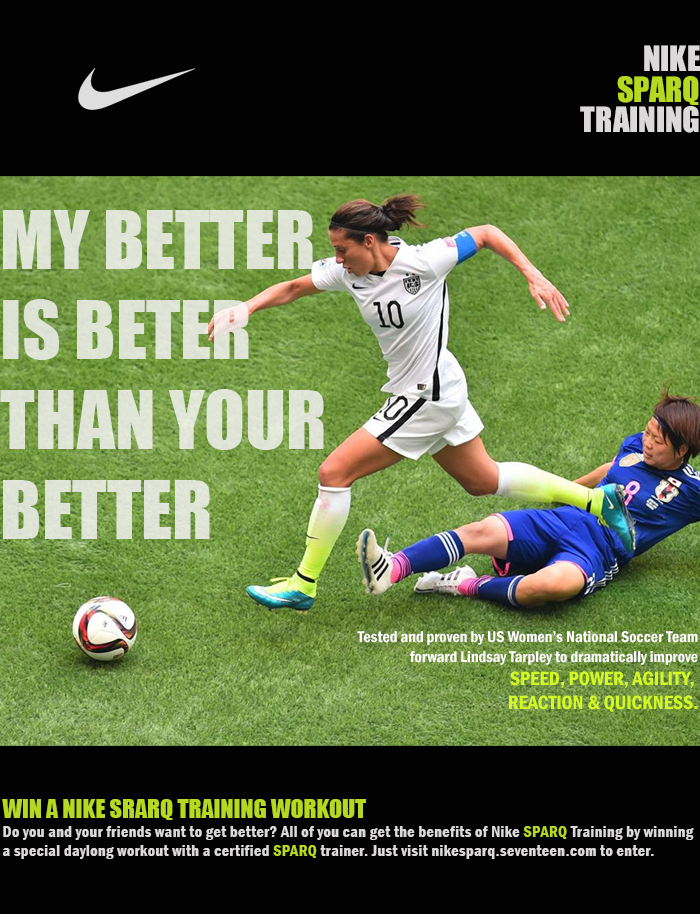
<style>
.page{position:relative;width:700px;height:914px;background:#030202}
.page>*{position:absolute;margin:0}
.t1{font:32.2px/30.4px "Impact"}
.t2{font:75px "Impact";color:#dfe4d6}
.t3{font:16.1px "FranklinGothic-DemiCond";color:#fcfafa}
.t4{font:19.7px "FranklinGothic-DemiCond";color:#d2f926}
.t5{font:16px "FranklinGothic-DemiCond";letter-spacing:0.025em}
.t6{font:24px "Impact"}
</style>
<div class="page">
<p class="t1" style="left:580px;top:45px;width:120px;height:88px;text-align:right">NIKE<br> SPARQ<br>TRAINING</p>
<p class="t2" style="left:0px;top:210px;width:324px;height:329px">MY BETTER<br>IS BETER<br>THAN YOUR<br>BETTER</p>
<p class="t3" style="left:357px;top:631px;width:341px;height:81px;text-align:right">Tested and proven by US Women’s National Soccer Team<br> forward Lindsay Tarpley to dramatically improve<br><span class="t4">SPEED, POWER, AGILITY, <br>REACTION &amp; QUICKNESS.</span></p>
<p class="t5" style="left:2px;top:799px;width:692px;height:60px"><span class="t6">WIN A NIKE SRARQ TRAINING WORKOUT<br></span>Do you and your friends want to get better? All of you can get the benefits of Nike SPARQ Training by winning<br>a special daylong workout with a certified SPARQ trainer. Just visit nikesparq.seventeen.com to enter.</p>
</div>
